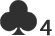
<style>
.page{position:relative;width:55px;height:36px;background:#ffffff}
.page>*{position:absolute;margin:0}
.t1{font:23.4px "MyriadPro-Regular";letter-spacing:-0.1em;color:#303030;font-weight:bold}
</style>
<div class="page">
<p class="t1" style="left:40px;top:19px;width:12px;height:17px">4</p>
</div>
